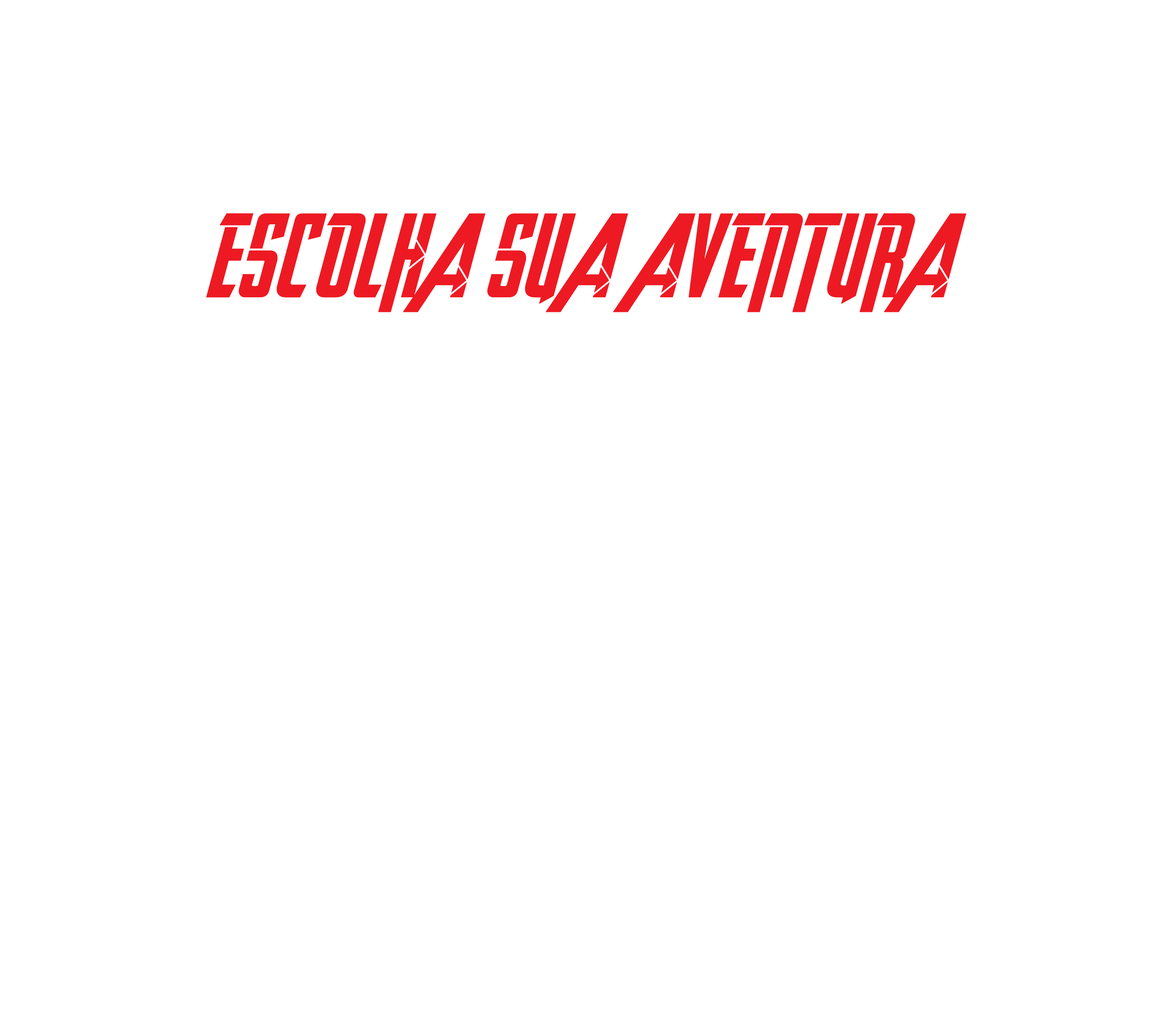
<style>
.page{position:relative;width:1176px;height:1014px;background:#ffffff}
.page>*{position:absolute;margin:0}
.t1{font:81.5px "AvengeanceHeroicAvengerBold";color:#ed1a23;text-transform:uppercase;scale:0.92 1}
</style>
<div class="page">
<p class="t1" style="left:206px;top:213px;width:760px;height:99px">ESCOLHA  SUA  AVENTURA</p>
</div>
